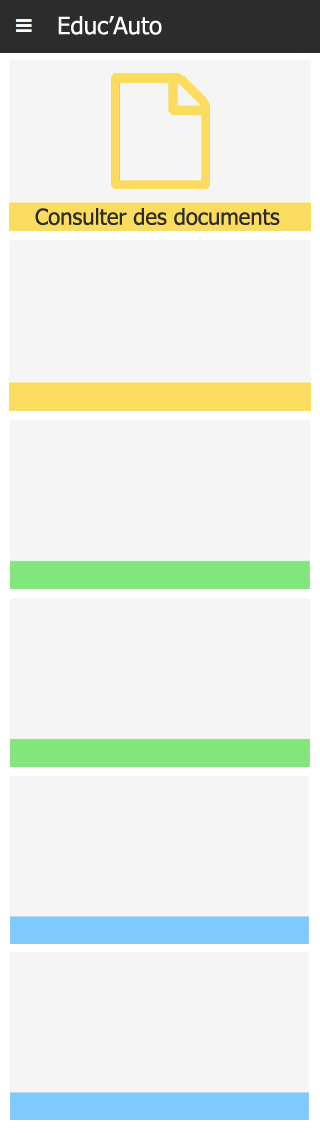
<style>
.page{position:relative;width:320px;height:1133px;background:#f5f5f5}
.page>*{position:absolute;margin:0}
.t1{font:24px "Tahoma";color:#ffffff}
.t2{font:22px "Tahoma";color:#2c2c2c}
</style>
<div class="page">
<p class="t1" style="left:58px;top:16px;width:104px;height:19px">Educ’Auto</p>
<p class="t2" style="left:35px;top:208px;width:245px;height:18px">Consulter des documents</p>
</div>
